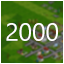
<style>
.page{position:relative;width:64px;height:64px}
.page>*{position:absolute;margin:0}
.t1{font:25px "Gadugi";color:#ffffff}
</style>
<div class="page">
<p class="t1" style="left:6px;top:23px;width:52px;height:18px">2000</p>
</div>
